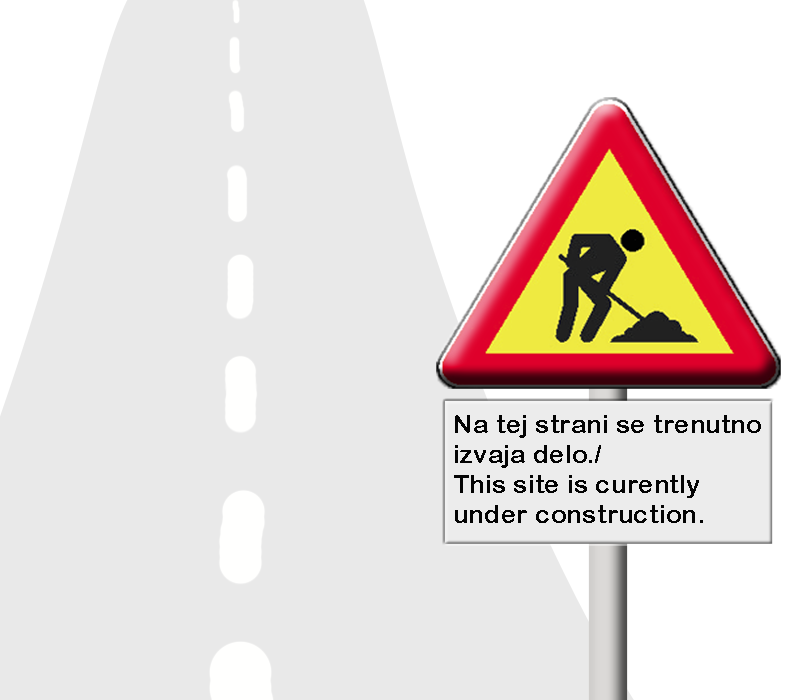
<style>
.page{position:relative;width:800px;height:700px;background:#e9e9e9}
.page>*{position:absolute;margin:0}
.t1{font:24.9px "ArialRoundedMTBold";color:#040404;scale:1.05 1}
</style>
<div class="page">
<p class="t1" style="left:454px;top:415px;width:307px;height:108px">Na tej strani se trenutno izvaja delo./<br>This site is curently under construction.</p>
</div>
